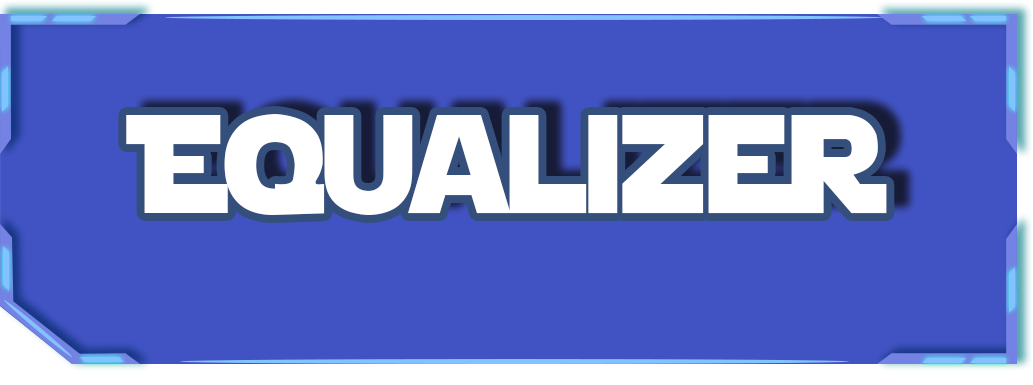
<style>
.page{position:relative;width:1033px;height:385px;background:#4153c3}
.page>*{position:absolute;margin:0}
.t1{font:138.9px "StarJedi";letter-spacing:0.001em;color:#ffffff;scale:0.9 1}
</style>
<div class="page">
<p class="t1" style="left:126px;top:114px;width:761px;height:101px">Equalizer</p>
</div>
